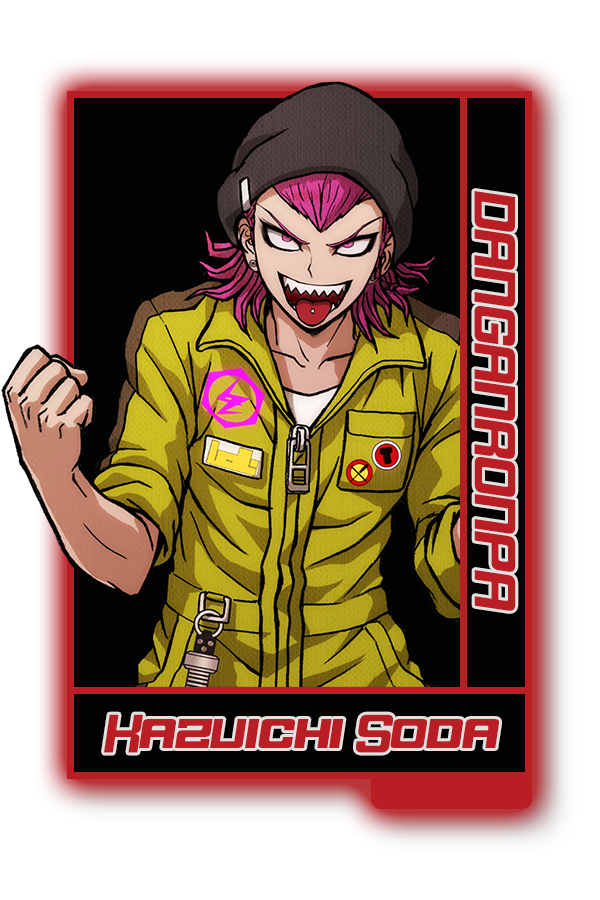
<style>
.page{position:relative;width:600px;height:900px;background:#020202}
.page>*{position:absolute;margin:0}
.t1{font:48.8px "DorBlue";color:#bb2c2e}
.t2{font:45.6px "DorBlue";color:#bb2c2e}
</style>
<div class="page">
<p class="t1" style="left:474px;top:191px;width:42px;height:420px;rotate:90deg">DANGANRONPA</p>
<p class="t2" style="left:104px;top:714px;width:395px;height:39px">Kazuichi Soda</p>
</div>
